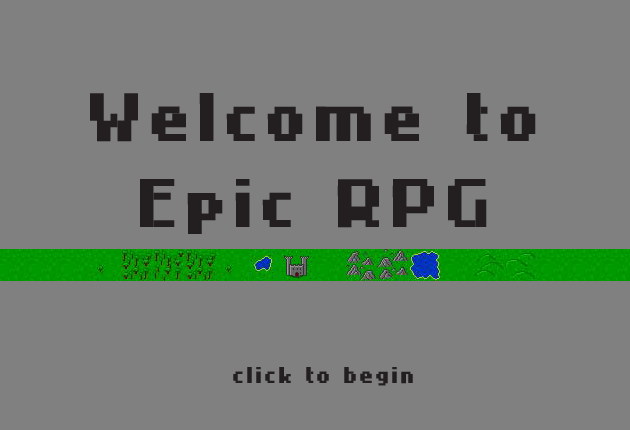
<style>
.page{position:relative;width:630px;height:430px;background:#808080}
.page>*{position:absolute;margin:0}
.t1{font:72px "4Mini";color:#231f20}
.t2{font:24px "4Mini";color:#231f20}
</style>
<div class="page">
<p class="t1" style="left:90px;top:93px;width:446px;height:141px;text-align:center">Welcome to<br>Epic RPG</p>
<p class="t2" style="left:233px;top:367px;width:180px;height:19px">click to begin</p>
</div>
